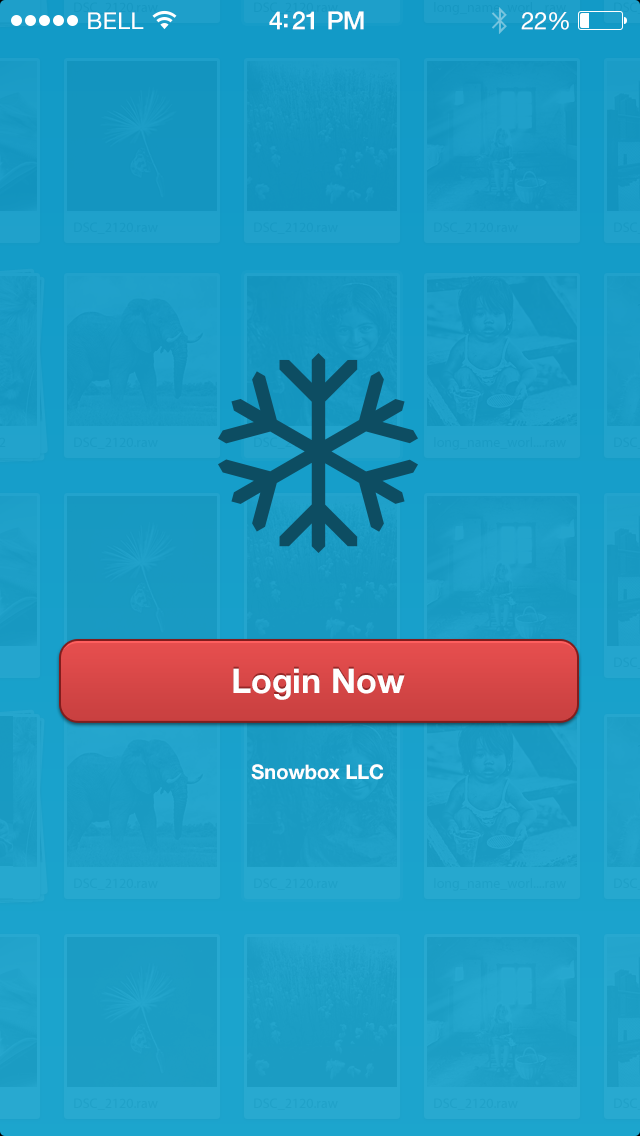
<style>
.page{position:relative;width:640px;height:1136px}
.page>*{position:absolute;margin:0}
.t1{font:23px "HelveticaNeue";letter-spacing:0.02em;color:#ffffff}
.t2{font:25px "HelveticaNeue-Medium";letter-spacing:-0.02em;color:#ffffff}
.t3{font:24px "HelveticaNeue";letter-spacing:-0.02em;color:#ffffff}
.t4{font:34px "HelveticaNeue-Bold";color:#ffffff}
.t5{font:20px "HelveticaNeue-Bold";color:#ffffff}
</style>
<div class="page">
<p class="t1" style="left:88px;top:12px;width:56px;height:17px">BELL</p>
<p class="t2" style="left:269px;top:11px;width:95px;height:19px">4:21 PM</p>
<p class="t3" style="left:521px;top:12px;width:48px;height:18px">22%</p>
<p class="t4" style="left:233px;top:668px;width:172px;height:32px">Login Now</p>
<p class="t5" style="left:251px;top:764px;width:133px;height:16px">Snowbox LLC</p>
</div>
